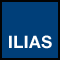
<style>
.page{position:relative;width:60px;height:60px;background:#003f79}
.page>*{position:absolute;margin:0}
.t1{font:17px "HelveticaNeue-Bold";letter-spacing:0.025em;color:#ffffff}
</style>
<div class="page">
<p class="t1" style="left:9px;top:35px;width:43px;height:14px">ILIAS</p>
</div>
